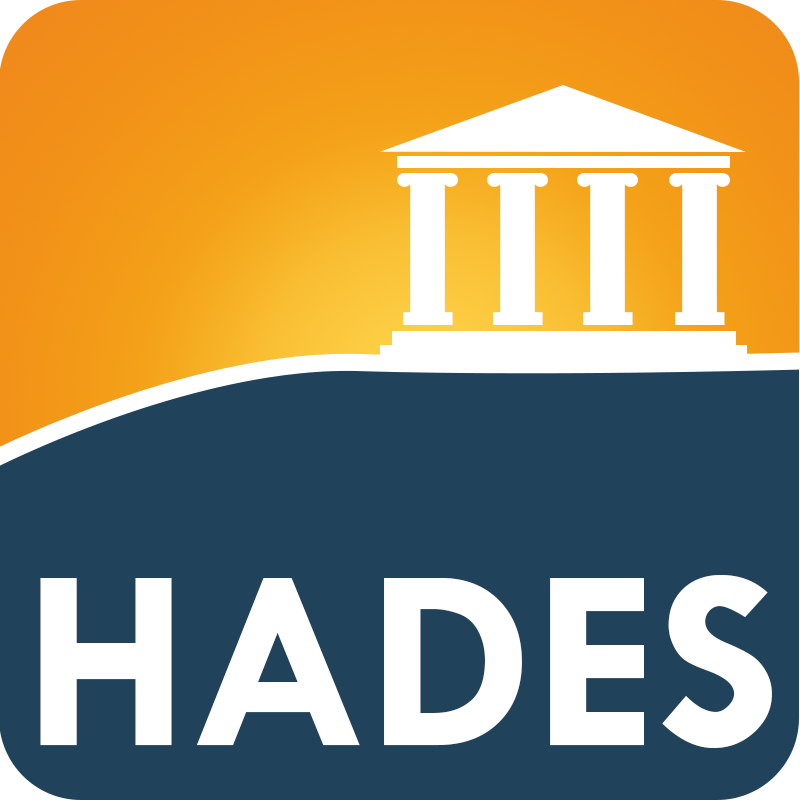
<style>
.page{position:relative;width:800px;height:800px;background:#20425a}
.page>*{position:absolute;margin:0}
.t1{font:260px "TwCenMT-Bold";color:#ffffff}
</style>
<div class="page">
<p class="t1" style="left:40px;top:575px;width:732px;height:173px">HADES</p>
</div>
